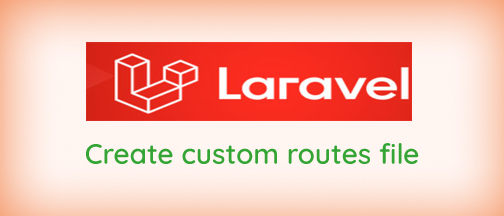
<style>
.page{position:relative;width:504px;height:216px}
.page>*{position:absolute;margin:0}
.t1{font:28px "Quicksand-SemiBold";color:#34a534}
</style>
<div class="page">
<p class="t1" style="left:86px;top:143px;width:333px;height:21px">Create custom routes file</p>
</div>
